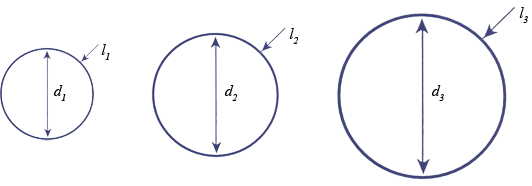
<style>
.page{position:relative;width:532px;height:186px;background:#ffffff}
.page>*{position:absolute;margin:0}
.t1{font:15.3px "TimesNewRomanPS-ItalicMT";letter-spacing:-0.04em;color:#000000;scale:1.08 1}
</style>
<div class="page">
<p class="t1" style="left:519px;top:7px;width:9px;height:16px">l3</p>
<p class="t1" style="left:289px;top:28px;width:9px;height:16px">l2</p>
<p class="t1" style="left:101px;top:44px;width:9px;height:16px">l1</p>
<p class="t1" style="left:53px;top:85px;width:13px;height:16px">d1</p>
<p class="t1" style="left:224px;top:85px;width:13px;height:16px">d2</p>
<p class="t1" style="left:431px;top:85px;width:13px;height:16px">d3</p>
</div>
